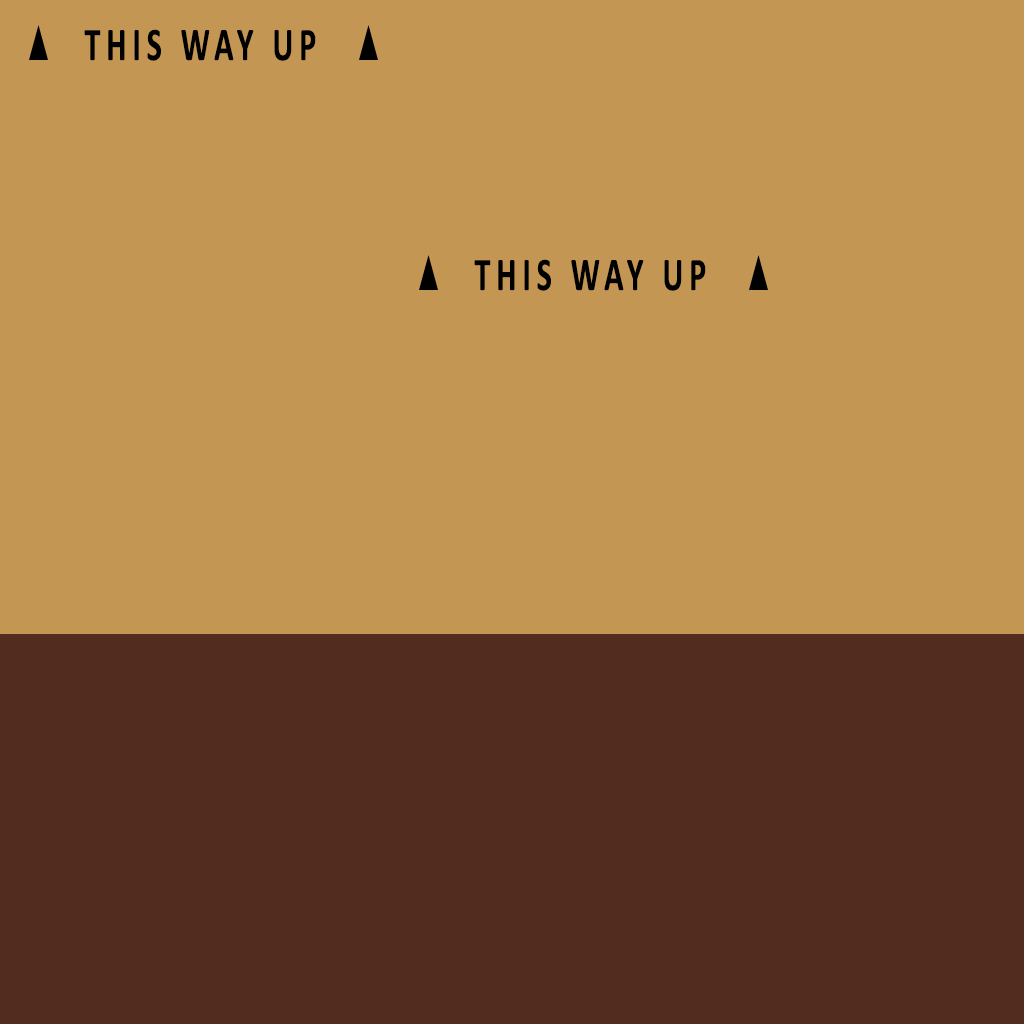
<style>
.page{position:relative;width:1024px;height:1024px;background:#c39654}
.page>*{position:absolute;margin:0}
.t1{font:47px "Calibri-Bold";letter-spacing:0.18em;color:#000000;scale:0.68 1}
</style>
<div class="page">
<p class="t1" style="left:84px;top:29px;width:232px;height:32px">THIS WAY UP</p>
<p class="t1" style="left:474px;top:259px;width:232px;height:32px">THIS WAY UP</p>
</div>
